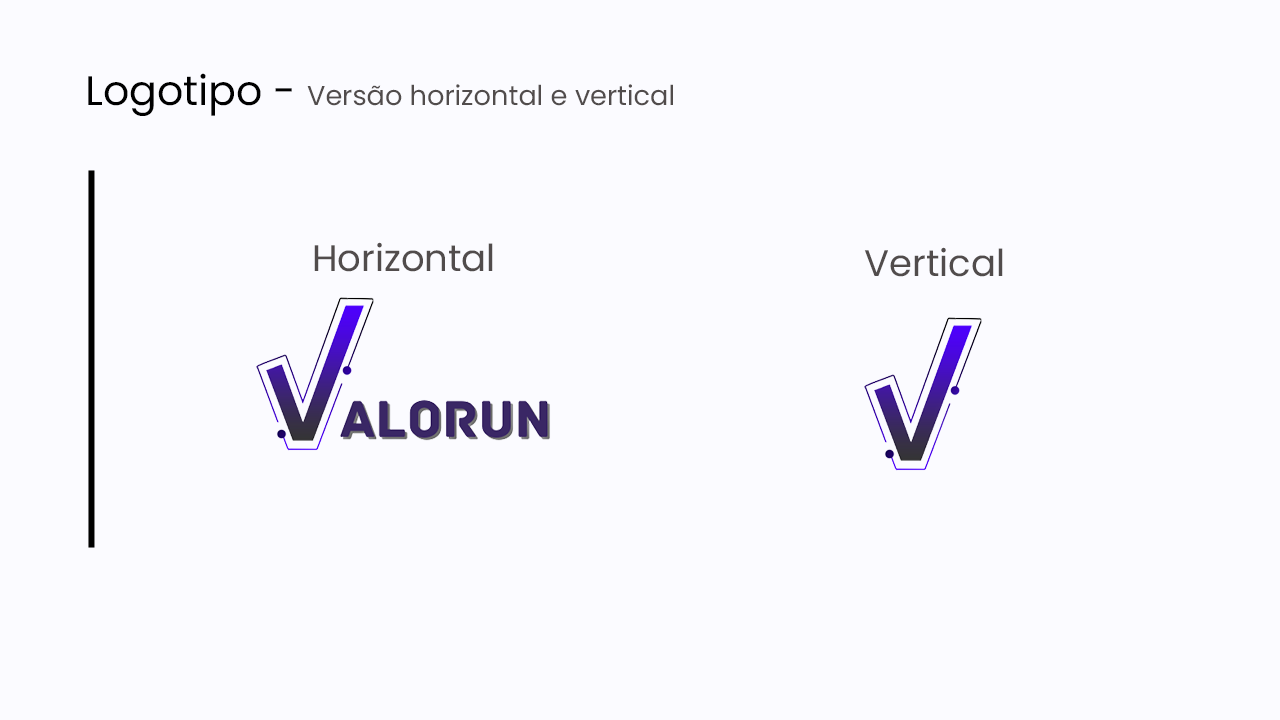
<style>
.page{position:relative;width:1280px;height:720px;background:#fbfbff}
.page>*{position:absolute;margin:0}
.t1{font:27.2px "Poppins-Regular";color:#514c4c}
.t2{font:41.2px "Poppins-Regular";color:#000000}
.t3{font:37px "Poppins-Regular";color:#514c4c}
</style>
<div class="page">
<p class="t1" style="left:88px;top:73px;width:585px;height:43px"><span class="t2">Logotipo - </span>Versão horizontal e vertical</p>
<p class="t3" style="left:314px;top:242px;width:179px;height:30px">Horizontal</p>
<p class="t3" style="left:864px;top:247px;width:139px;height:30px">Vertical</p>
</div>
